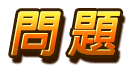
<style>
.page{position:relative;width:135px;height:69px;background:#ffffff}
.page>*{position:absolute;margin:0}
.t1{font:48px "AdobeFanHeitiStd-Bold";letter-spacing:0.2em;font-weight:bold;font-style:italic}
</style>
<div class="page">
<p class="t1" style="left:11px;top:11px;width:110px;height:45px">問題</p>
</div>
